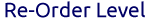
<style>
.page{position:relative;width:150px;height:20px;background:#ffffff}
.page>*{position:absolute;margin:0}
.t1{font:20.8px "Ubuntu-Regular";color:#000066}
</style>
<div class="page">
<p class="t1" style="left:5px;top:1px;width:140px;height:17px">Re-Order Level</p>
</div>
